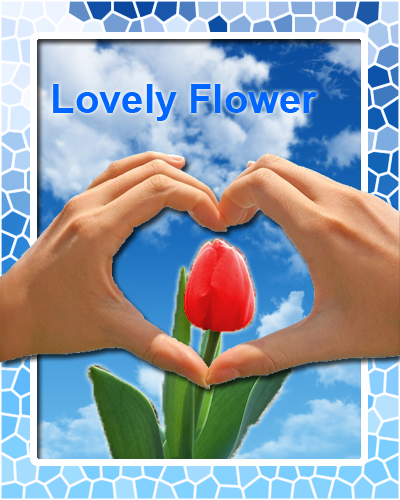
<style>
.page{position:relative;width:400px;height:500px}
.page>*{position:absolute;margin:0}
.t1{font:40px "Arial-BoldMT";color:#0066ff}
</style>
<div class="page">
<p class="t1" style="left:53px;top:84px;width:264px;height:37px">Lovely Flower</p>
</div>
